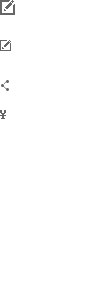
<style>
.page{position:relative;width:100px;height:300px;background:#ffffff}
.page>*{position:absolute;margin:0}
.t1{font:12px "SimSun";letter-spacing:0.02em;color:#666666}
</style>
<div class="page">
<p class="t1" style="left:0px;top:110px;width:6px;height:9px">￥</p>
</div>
